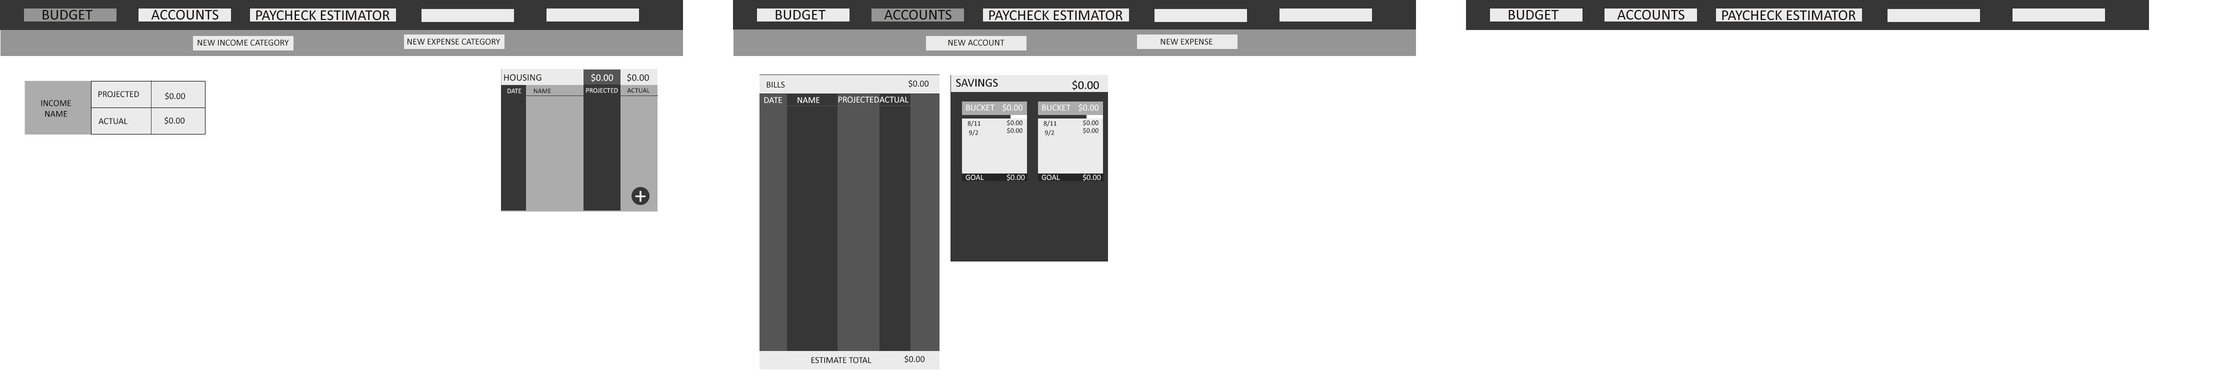
<style>
.page{position:relative;width:2219px;height:384px;background:#ffffff}
.page>*{position:absolute;margin:0}
.t1{font:15px "Calibri";color:#121005}
.t2{font:9px "Calibri";color:#121005}
.t3{font:9.8px "Calibri";color:#121005}
.t4{font:9.8px "Calibri";color:#ffffff}
.t5{font:7px "Calibri";color:#fefefe}
.t6{font:7px "Calibri";color:#010101}
.t7{font:7px "Calibri";color:#000000}
.t8{font:9px "Calibri";color:#000000}
.t9{font:12px "Calibri";color:#000000}
.t10{font:9px "Calibri";color:#ffffff}
.t11{font:8px "Calibri";color:#ffffff}
.t12{font:24px "Calibri";color:#fffffe}
.t13{font:9px "Calibri";color:#010101}
</style>
<div class="page">
<p class="t1" style="left:42px;top:10px;width:50px;height:10px">BUDGET</p>
<p class="t1" style="left:151px;top:10px;width:67px;height:10px">ACCOUNTS</p>
<p class="t1" style="left:256px;top:10px;width:134px;height:10px">PAYCHECK ESTIMATOR</p>
<p class="t1" style="left:776px;top:10px;width:50px;height:10px">BUDGET</p>
<p class="t1" style="left:884px;top:10px;width:68px;height:10px">ACCOUNTS</p>
<p class="t1" style="left:989px;top:10px;width:133px;height:10px">PAYCHECK ESTIMATOR</p>
<p class="t1" style="left:1508px;top:10px;width:50px;height:10px">BUDGET</p>
<p class="t1" style="left:1617px;top:10px;width:67px;height:10px">ACCOUNTS</p>
<p class="t1" style="left:1722px;top:10px;width:134px;height:10px">PAYCHECK ESTIMATOR</p>
<p class="t2" style="left:198px;top:40px;width:91px;height:6px">NEW INCOME CATEGORY</p>
<p class="t2" style="left:408px;top:38px;width:92px;height:7px">NEW EXPENSE CATEGORY</p>
<p class="t2" style="left:948px;top:40px;width:56px;height:6px">NEW ACCOUNT</p>
<p class="t2" style="left:1160px;top:38px;width:52px;height:7px">NEW EXPENSE</p>
<p class="t3" style="left:504px;top:74px;width:38px;height:7px">HOUSING</p>
<p class="t4" style="left:591px;top:73px;width:22px;height:9px">$0.00</p>
<p class="t3" style="left:627px;top:73px;width:22px;height:9px">$0.00</p>
<p class="t5" style="left:508px;top:88px;width:14px;height:6px">DATE</p>
<p class="t6" style="left:534px;top:88px;width:17px;height:6px">NAME</p>
<p class="t5" style="left:586px;top:88px;width:32px;height:5px">PROJECTED</p>
<p class="t7" style="left:627px;top:88px;width:23px;height:5px">ACTUAL</p>
<p class="t2" style="left:766px;top:82px;width:19px;height:6px">BILLS</p>
<p class="t8" style="left:908px;top:80px;width:20px;height:8px">$0.00</p>
<p class="t9" style="left:956px;top:78px;width:42px;height:9px">SAVINGS</p>
<p class="t9" style="left:1072px;top:80px;width:27px;height:10px">$0.00</p>
<p class="t8" style="left:41px;top:100px;width:30px;height:17px;text-align:center">INCOME<br>NAME</p>
<p class="t8" style="left:98px;top:91px;width:41px;height:7px">PROJECTED</p>
<p class="t8" style="left:165px;top:92px;width:20px;height:8px">$0.00</p>
<p class="t10" style="left:764px;top:97px;width:18px;height:6px">DATE</p>
<p class="t10" style="left:798px;top:97px;width:22px;height:6px">NAME</p>
<p class="t10" style="left:838px;top:96px;width:41px;height:7px">PROJECTED</p>
<p class="t10" style="left:880px;top:96px;width:28px;height:7px">ACTUAL</p>
<p class="t10" style="left:966px;top:104px;width:28px;height:7px">BUCKET</p>
<p class="t10" style="left:1002px;top:104px;width:20px;height:8px">$0.00</p>
<p class="t10" style="left:1042px;top:104px;width:28px;height:7px">BUCKET</p>
<p class="t10" style="left:1078px;top:104px;width:20px;height:8px">$0.00</p>
<p class="t8" style="left:98px;top:118px;width:30px;height:6px">ACTUAL</p>
<p class="t8" style="left:164px;top:116px;width:20px;height:9px">$0.00</p>
<p class="t7" style="left:968px;top:120px;width:12px;height:7px">8/11</p>
<p class="t7" style="left:1007px;top:120px;width:15px;height:6px">$0.00</p>
<p class="t7" style="left:1044px;top:120px;width:12px;height:7px">8/11</p>
<p class="t7" style="left:1083px;top:120px;width:15px;height:6px">$0.00</p>
<p class="t7" style="left:969px;top:130px;width:9px;height:6px">9/2</p>
<p class="t7" style="left:1007px;top:128px;width:15px;height:6px">$0.00</p>
<p class="t7" style="left:1045px;top:130px;width:9px;height:6px">9/2</p>
<p class="t7" style="left:1083px;top:128px;width:15px;height:6px">$0.00</p>
<p class="t11" style="left:1007px;top:174px;width:18px;height:7px">$0.00</p>
<p class="t11" style="left:1083px;top:174px;width:18px;height:7px">$0.00</p>
<p class="t11" style="left:966px;top:174px;width:18px;height:6px">GOAL</p>
<p class="t11" style="left:1042px;top:174px;width:18px;height:6px">GOAL</p>
<p class="t12" style="left:635px;top:190px;width:11px;height:12px">+</p>
<p class="t13" style="left:812px;top:357px;width:60px;height:7px">ESTIMATE TOTAL</p>
<p class="t8" style="left:904px;top:355px;width:20px;height:9px">$0.00</p>
</div>
